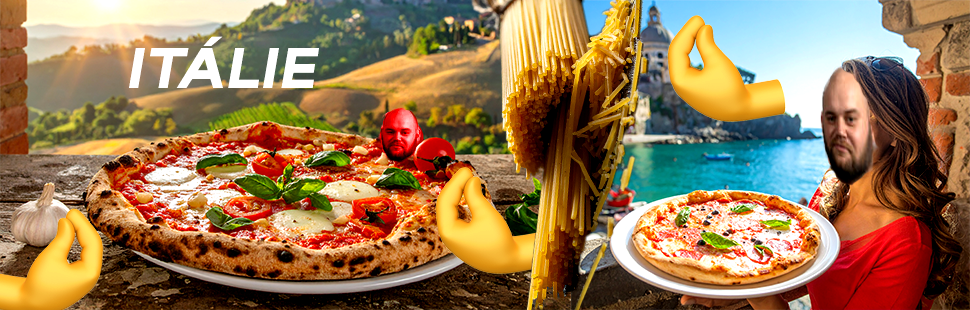
<style>
.page{position:relative;width:970px;height:310px}
.page>*{position:absolute;margin:0}
.t1{font:50px "AreaExtended-ExtrablackItalic";color:#ffffff}
</style>
<div class="page">
<p class="t1" style="left:129px;top:36px;width:190px;height:52px">ITÁLIE</p>
</div>
